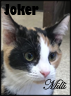
<style>
.page{position:relative;width:71px;height:96px}
.page>*{position:absolute;margin:0}
.t1{font:14.8px "GillSans-UltraBoldCondensed";color:#000000}
.t2{font:14px "EdwardianScriptITC";color:#000000}
</style>
<div class="page">
<p class="t1" style="left:4px;top:4px;width:35px;height:11px">Joker</p>
<p class="t2" style="left:43px;top:79px;width:24px;height:11px">Milli</p>
</div>
